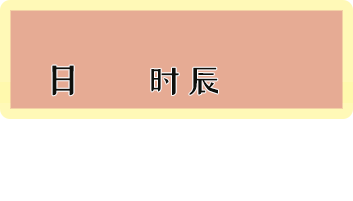
<style>
.page{position:relative;width:353px;height:201px;background:#e6ab94}
.page>*{position:absolute;margin:0}
.t1{font:36px "xiaowei";letter-spacing:0.047em;color:#0f100c;font-weight:bold}
</style>
<div class="page">
<p class="t1" style="left:52px;top:65px;width:22px;height:31px">日</p>
<p class="t1" style="left:151px;top:67px;width:67px;height:28px">时辰</p>
</div>
